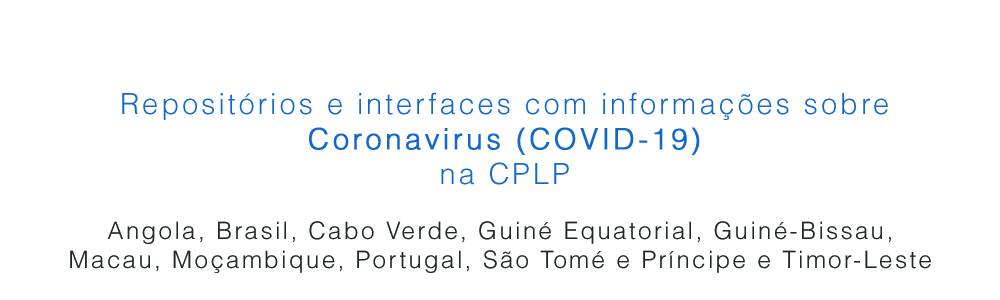
<style>
.page{position:relative;width:1000px;height:300px;background:#ffffff}
.page>*{position:absolute;margin:0}
.t1{font:29px "Helvetica-Light";letter-spacing:0.1em;color:#1268cb}
.t2{font:29px "Helvetica-Light";letter-spacing:0.1em;color:#1268cb;font-weight:bold}
.t3{font:24px "Helvetica-Light";letter-spacing:0.1em;color:#202728}
</style>
<div class="page">
<p class="t1" style="left:122px;top:92px;width:766px;height:93px;text-align:center">Repositórios e interfaces com informações sobre<br><span class="t2">Coronavirus (COVID-19)<br></span>na CPLP</p>
<p class="t3" style="left:70px;top:221px;width:861px;height:52px;text-align:center">Angola, Brasil, Cabo Verde, Guiné Equatorial, Guiné-Bissau,<br>Macau, Moçambique, Portugal, São Tomé e Príncipe e Timor-Leste</p>
</div>
